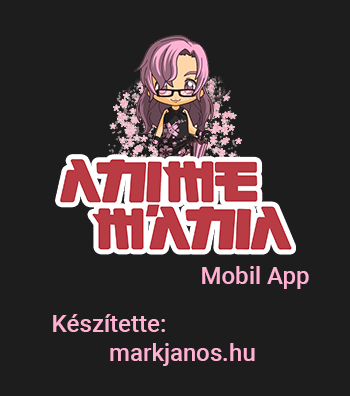
<style>
.page{position:relative;width:350px;height:396px;background:#1d1d1d}
.page>*{position:absolute;margin:0}
.t1{font:24px "Roboto-Medium";color:#feb1d1}
</style>
<div class="page">
<p class="t1" style="left:202px;top:266px;width:107px;height:23px">Mobil App</p>
<p class="t1" style="left:53px;top:314px;width:202px;height:52px;text-align:center">Készítette:<br>markjanos.hu</p>
</div>
